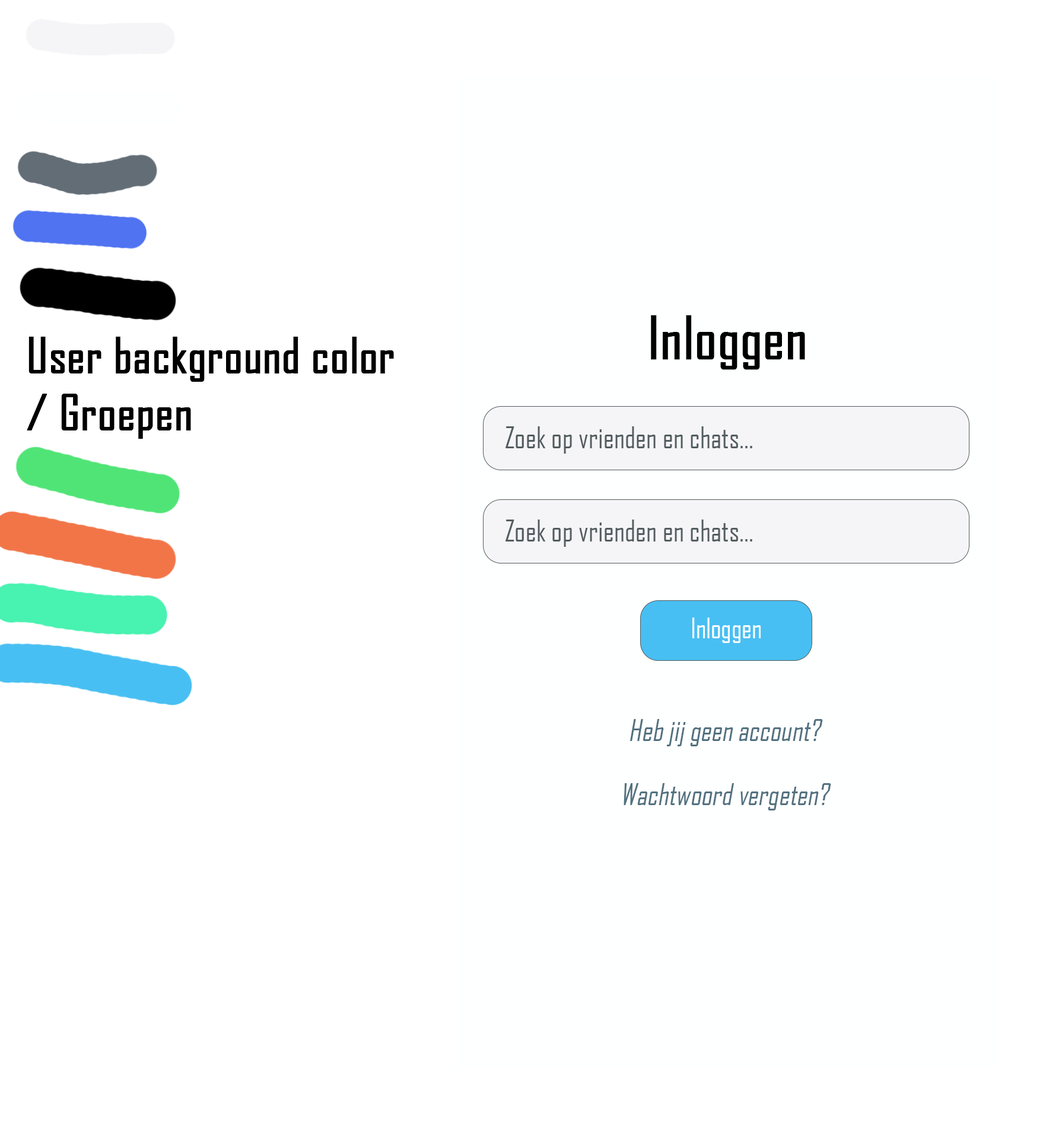
<style>
.page{position:relative;width:1046px;height:1140px;background:#ffffff}
.page>*{position:absolute;margin:0}
.t1{font:56.4px "AgencyFB-Reg";color:#000000;font-weight:bold}
.t2{font:47.5px "AgencyFB-Reg";color:#000000;font-weight:bold}
.t3{font:28.6px "AgencyFB-Reg";color:#535c60}
.t4{font:27.1px "AgencyFB-Reg";color:#ffffff}
.t5{font:28.6px "AgencyFB-Reg";color:#537180;font-style:italic}
</style>
<div class="page">
<p class="t1" style="left:651px;top:315px;width:154px;height:55px">Inloggen</p>
<p class="t2" style="left:27px;top:337px;width:367px;height:102px">User background color<br>/ Groepen</p>
<p class="t3" style="left:506px;top:426px;width:247px;height:27px">Zoek op vrienden en chats...</p>
<p class="t3" style="left:506px;top:519px;width:247px;height:28px">Zoek op vrienden en chats...</p>
<p class="t4" style="left:693px;top:617px;width:68px;height:26px">Inloggen</p>
<p class="t5" style="left:630px;top:719px;width:193px;height:27px">Heb jij geen account?</p>
<p class="t5" style="left:624px;top:783px;width:208px;height:27px">Wachtwoord vergeten?</p>
</div>
